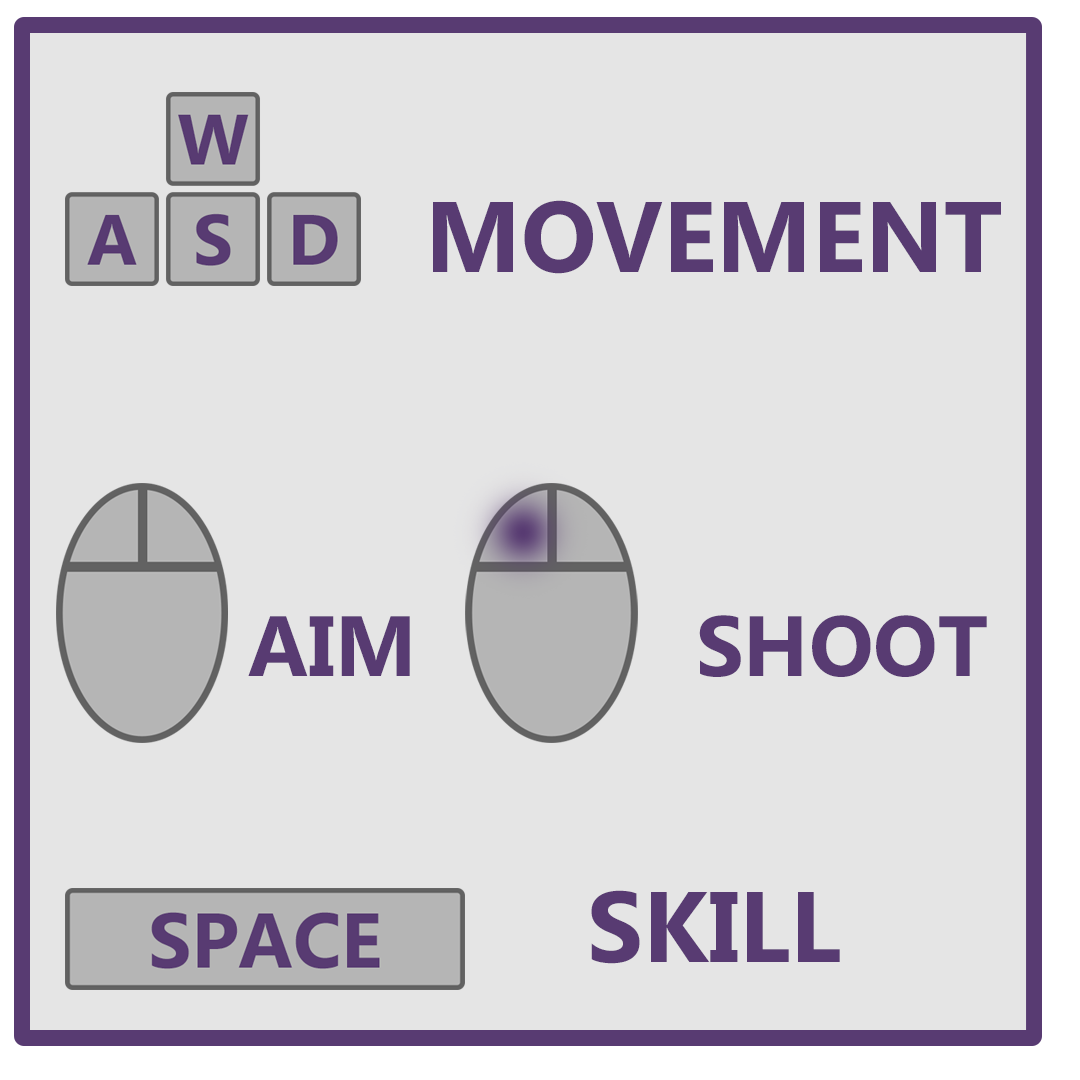
<style>
.page{position:relative;width:1080px;height:1080px;background:#e5e5e5}
.page>*{position:absolute;margin:0}
.t1{font:100px "MyanmarText-Bold";color:#583b72}
.t2{font:85.2px "MyanmarText-Bold";color:#583b72}
</style>
<div class="page">
<p class="t1" style="left:433px;top:200px;width:568px;height:74px">MOVEMENT</p>
<p class="t2" style="left:248px;top:616px;width:162px;height:60px">AIM</p>
<p class="t2" style="left:699px;top:615px;width:288px;height:62px">SHOOT</p>
<p class="t1" style="left:591px;top:890px;width:249px;height:74px">SKILL</p>
</div>
